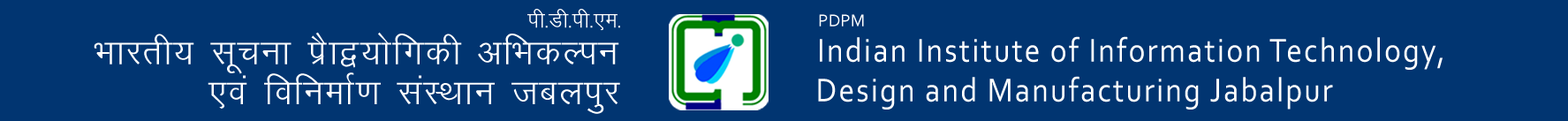
<style>
.page{position:relative;width:1568px;height:121px;background:#013571}
.page>*{position:absolute;margin:0}
.t1{font:25.8px "KrutiDev010";color:#ffffff}
.t2{font:17.9px "Corbel";color:#ffffff}
.t3{font:35.8px "Corbel";color:#ffffff}
.t4{font:41.4px/40.2px "KrutiDev010";letter-spacing:0.02em;color:#ffffff}
.t5{font:34.4px/39.6px "Corbel";letter-spacing:0.06em;color:#fefefe;scale:0.91 1}
</style>
<div class="page">
<p class="t1" style="left:527px;top:9px;width:93px;height:22px">ih-Mh-ih-,e-</p>
<p class="t2" style="left:819px;top:14px;width:45px;height:13px"><span class="t3">   </span>PDPM</p>
<p class="t4" style="left:94px;top:32px;width:526px;height:82px;text-align:center">Hkkjrh; lwpuk iSzk};ksfxdh vfHkdYiu<br>              ,oa fofuekZ.k laLFkku tcyiqj</p>
<p class="t5" style="left:818px;top:36px;width:625px;height:74px;text-align:center">Indian Institute of Information Technology,<br>Design and Manufacturing Jabalpur</p>
</div>
